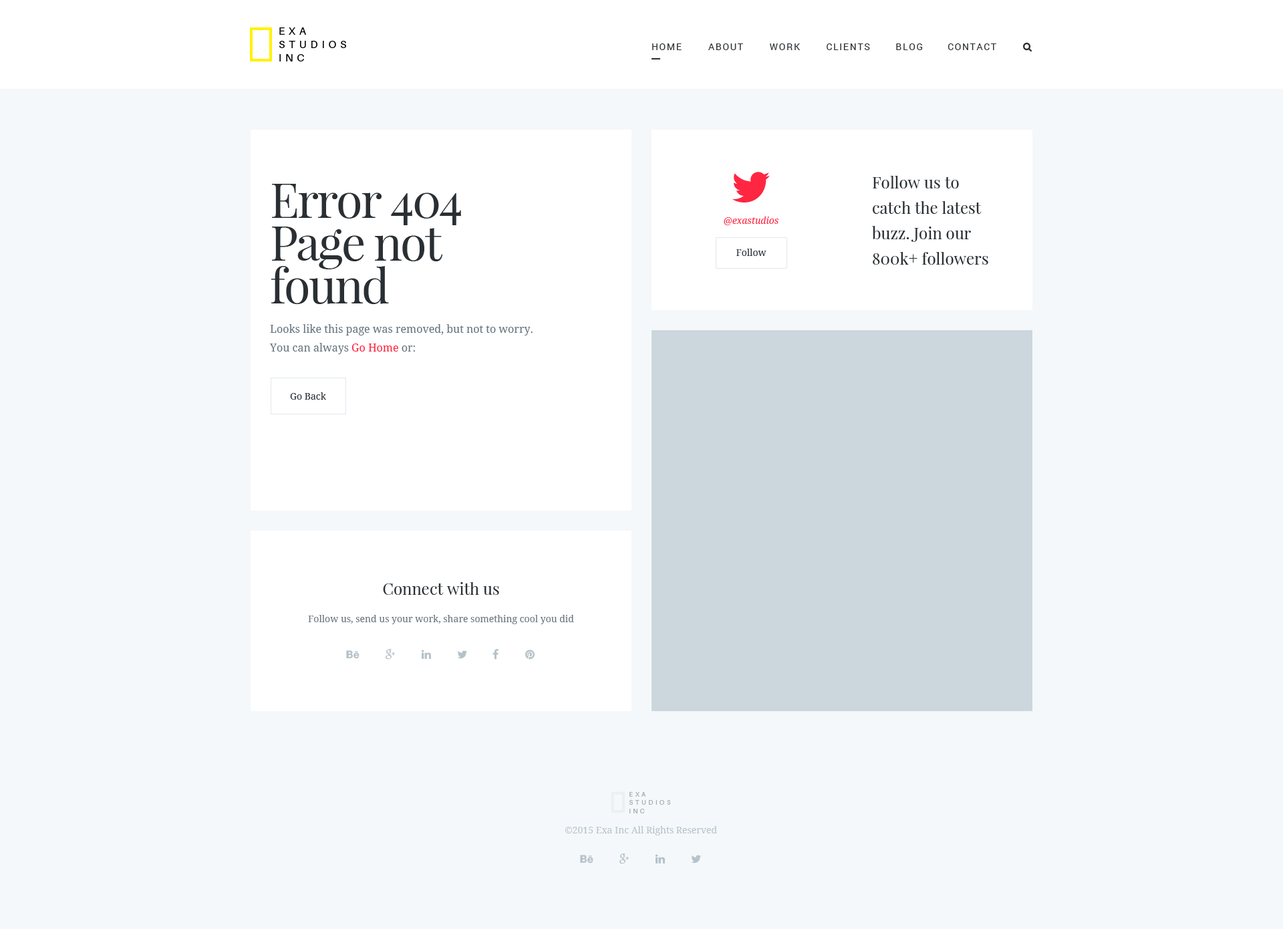
<style>
.page{position:relative;width:1283px;height:929px;background:#f5f8fa}
.page>*{position:absolute;margin:0}
.t1{font:10.7px/13.4px "Aileron-Regular";letter-spacing:0.36em;color:#000000;text-transform:uppercase}
.t2{font:9.4px "Roboto-Regular";letter-spacing:0.12em;color:#292f33;text-transform:uppercase}
.t3{font:48.1px/42.8px "PlayfairDisplay-Regular";letter-spacing:-0.04em;color:#292f33}
.t4{font:16px/25.4px "PlayfairDisplay-Regular";color:#292f33}
.t5{font:9.4px "DroidSerif-Italic";color:#ff2641}
.t6{font:9.4px "DroidSerif";color:#292f33}
.t7{font:10.7px/18.7px "DroidSerif";color:#66757f}
.t8{font:10.7px/18.7px "DroidSerif";color:#ff2641}
.t9{font:16px "PlayfairDisplay-Regular";color:#292f33}
.t10{font:9.4px "DroidSerif";color:#66757f}
.t11{font:6.6px/8.2px "Aileron-Regular";letter-spacing:0.36em;color:#abadaf;text-transform:uppercase}
.t12{font:9.4px "DroidSerif";color:#b5c2ca}
</style>
<div class="page">
<p class="t1" style="left:279px;top:27px;width:67px;height:34px">Exa<br>Studios<br>Inc</p>
<p class="t2" style="left:652px;top:43px;width:30px;height:7px">HOME</p>
<p class="t2" style="left:709px;top:43px;width:34px;height:7px">ABOUT</p>
<p class="t2" style="left:770px;top:43px;width:30px;height:7px">WORK</p>
<p class="t2" style="left:827px;top:43px;width:43px;height:7px">CLIENTS</p>
<p class="t2" style="left:896px;top:43px;width:27px;height:7px">BLOG</p>
<p class="t2" style="left:948px;top:43px;width:49px;height:7px">CONTACT</p>
<p class="t3" style="left:271px;top:184px;width:190px;height:120px">Error 404<br>Page not<br>found</p>
<p class="t4" style="left:872px;top:176px;width:117px;height:89px">Follow us to <br>catch the latest <br>buzz. Join our <br>800k+ followers</p>
<p class="t5" style="left:724px;top:217px;width:55px;height:8px">@exastudios</p>
<p class="t6" style="left:737px;top:249px;width:30px;height:7px">Follow</p>
<p class="t7" style="left:269px;top:324px;width:264px;height:30px">Looks like this page was removed, but not to worry. <br>You can always <span class="t8">Go Home </span>or:</p>
<p class="t6" style="left:290px;top:392px;width:36px;height:8px">Go Back</p>
<p class="t9" style="left:383px;top:582px;width:116px;height:13px">Connect with us</p>
<p class="t10" style="left:308px;top:615px;width:266px;height:9px">Follow us, send us your work, share something cool you did</p>
<p class="t11" style="left:629px;top:792px;width:42px;height:21px">Exa<br>Studios<br>Inc</p>
<p class="t12" style="left:565px;top:826px;width:152px;height:10px">©2015 Exa Inc All Rights Reserved</p>
</div>
